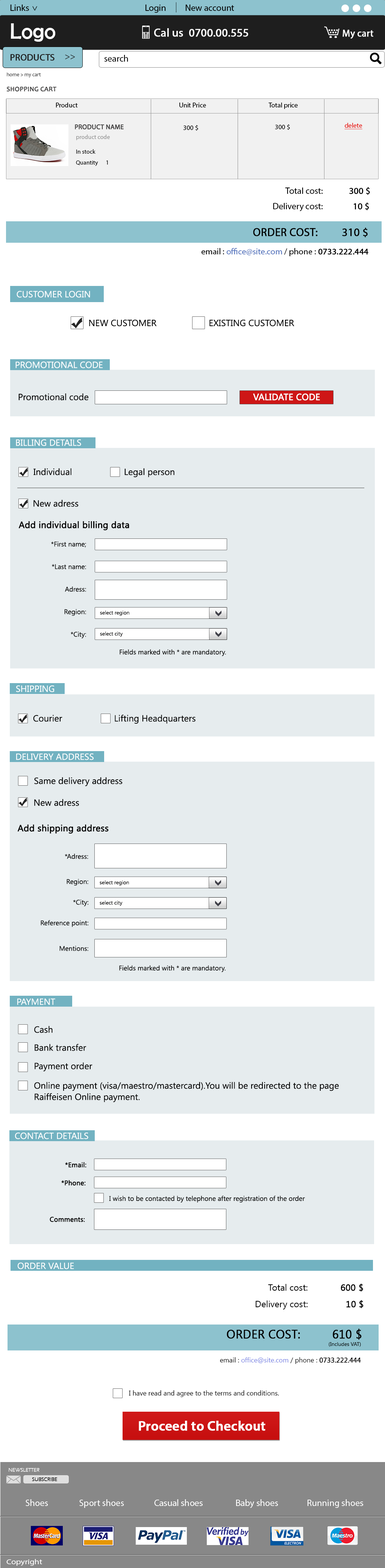
<style>
.page{position:relative;width:385px;height:1568px;background:#ffffff}
.page>*{position:absolute;margin:0}
.t1{font:9px "MyriadPro-Regular";color:#000000}
.t2{font:22.5px "BerlinSansFB-Reg";color:#ffffff}
.t3{font:11.3px "MyriadPro-Regular";color:#ffffff;font-weight:bold}
.t4{font:9.7px "MyriadPro-Regular";color:#ffffff;font-weight:bold}
.t5{font:9.2px "MyriadPro-Regular";color:#1e1e1e;text-transform:uppercase;font-weight:bold}
.t6{font:9px "MyriadPro-Regular";color:#1e1e1e;text-transform:uppercase}
.t7{font:9.2px "MyriadPro-Regular";color:#000000}
.t8{font:5.3px "Candara";color:#333333}
.t9{font:6.8px "Candara";color:#414040;text-transform:uppercase;font-weight:bold}
.t10{font:6.8px "MyriadPro-Regular";color:#000000}
.t11{font:6.8px "MyriadPro-Regular";color:#414040;text-transform:uppercase;font-weight:bold}
.t12{font:6.8px "MyriadPro-Regular";color:#020202}
.t13{font:6.8px "MyriadPro-Regular";color:#e81c17;text-decoration:underline}
.t14{font:6px "MyriadPro-Regular";color:#969696}
.t15{font:6px "MyriadPro-Regular";color:#020202}
.t16{font:9px "MyriadPro-Regular";color:#000000;font-weight:bold}
.t17{font:11.3px "MyriadPro-Regular";color:#000000;text-transform:uppercase;font-weight:bold}
.t18{font:8.6px "MyriadPro-Regular";color:#5272bc}
.t19{font:8.6px "MyriadPro-Regular";color:#000000}
.t20{font:8.6px "MyriadPro-Regular";color:#000000;font-weight:bold}
.t21{font:9px "SegoeUI";color:#ffffff;text-transform:uppercase}
.t22{font:9px "SegoeUI";color:#000000;text-transform:uppercase}
.t23{font:9px "SegoeUI";color:#000000}
.t24{font:9px "SegoeUI";color:#ffffff;text-transform:uppercase;font-weight:bold}
.t25{font:9px "SegoeUI";color:#000000;font-weight:bold}
.t26{font:6.8px/22.5px "SegoeUI";color:#000000}
.t27{font:5.3px "SegoeUI";color:#000000}
.t28{font:6.8px "SegoeUI";color:#000000}
.t29{font:8.9px "SegoeUI";color:#ffffff;text-transform:uppercase}
.t30{font:9px/11.3px "SegoeUI";color:#000000}
.t31{font:6.8px "SegoeUI";color:#000000;font-weight:bold}
.t32{font:11.9px "SegoeUI";color:#000000;text-transform:uppercase;font-weight:bold}
.t33{font:6.8px "SegoeUI";color:#7882e3}
.t34{font:13.5px "MyriadPro-Semibold";color:#ffffff;font-weight:bold}
.t35{font:5.3px "ErasITC-Light";color:#ffffff;text-transform:uppercase;font-weight:bold}
.t36{font:5.3px "ErasITC-Light";color:#000000;text-transform:uppercase;font-weight:bold}
.t37{font:9.2px "MyriadPro-Regular";color:#ffffff}
.t38{font:7.3px "MyriadPro-Regular";color:#fffefe;scale:1.18 1}
</style>
<div class="page">
<p class="t1" style="left:11px;top:5px;width:18px;height:6px">Links</p>
<p class="t1" style="left:145px;top:5px;width:21px;height:8px">Login</p>
<p class="t1" style="left:186px;top:5px;width:48px;height:6px">New account</p>
<p class="t1" style="left:32px;top:6px;width:5px;height:5px;rotate:90deg">&gt;</p>
<p class="t2" style="left:11px;top:23px;width:44px;height:19px">Logo</p>
<p class="t3" style="left:154px;top:28px;width:94px;height:9px">Cal us  0700.00.555</p>
<p class="t4" style="left:342px;top:30px;width:31px;height:9px">My cart</p>
<p class="t5" style="left:11px;top:54px;width:43px;height:7px">Products</p>
<p class="t6" style="left:65px;top:54px;width:10px;height:5px">&gt;&gt;</p>
<p class="t7" style="left:104px;top:55px;width:24px;height:7px">search</p>
<p class="t8" style="left:7px;top:73px;width:34px;height:4px">home &gt; my cart</p>
<p class="t9" style="left:7px;top:86px;width:49px;height:6px">shopping cart</p>
<p class="t10" style="left:56px;top:103px;width:22px;height:4px">Product</p>
<p class="t10" style="left:179px;top:103px;width:27px;height:4px">Unit Price</p>
<p class="t10" style="left:268px;top:103px;width:30px;height:6px">Total price</p>
<p class="t11" style="left:75px;top:124px;width:49px;height:6px">product name</p>
<p class="t12" style="left:183px;top:125px;width:15px;height:6px">300 $</p>
<p class="t12" style="left:275px;top:124px;width:15px;height:6px">300 $</p>
<p class="t13" style="left:344px;top:123px;width:18px;height:6px">delete</p>
<p class="t14" style="left:76px;top:135px;width:34px;height:5px">product code</p>
<p class="t15" style="left:76px;top:149px;width:19px;height:5px">In stock</p>
<p class="t15" style="left:76px;top:160px;width:32px;height:6px">Quantity      1</p>
<p class="t1" style="left:285px;top:187px;width:85px;height:8px">Total cost:<span class="t16">            300 $</span></p>
<p class="t1" style="left:273px;top:202px;width:96px;height:9px">Delivery cost: <span class="t16">             10 $</span></p>
<p class="t17" style="left:253px;top:228px;width:114px;height:9px">Order cost:         310 $</p>
<p class="t18" style="left:201px;top:248px;width:167px;height:8px"><span class="t19">email : </span>office@site.com <span class="t19">/ phone : </span><span class="t20">0733.222.444</span></p>
<p class="t21" style="left:17px;top:291px;width:73px;height:7px">Customer Login</p>
<p class="t22" style="left:89px;top:319px;width:68px;height:8px">new customer</p>
<p class="t22" style="left:209px;top:319px;width:85px;height:8px">existing Customer</p>
<p class="t21" style="left:15px;top:361px;width:88px;height:7px">promotional code</p>
<p class="t23" style="left:18px;top:393px;width:70px;height:8px">Promotional code</p>
<p class="t24" style="left:253px;top:393px;width:67px;height:8px">Validate code</p>
<p class="t21" style="left:16px;top:439px;width:65px;height:7px">billing details</p>
<p class="t23" style="left:33px;top:468px;width:141px;height:9px">Individual                     Legal person</p>
<p class="t23" style="left:33px;top:500px;width:45px;height:7px">New adress</p>
<p class="t25" style="left:18px;top:521px;width:111px;height:10px">Add individual billing data</p>
<p class="t26" style="left:51px;top:541px;width:35px;height:97px;text-align:right">*First name;<br>*Last name:<br>Adress:<br>Region:<br>*City:</p>
<p class="t27" style="left:100px;top:610px;width:29px;height:6px">select region</p>
<p class="t27" style="left:100px;top:631px;width:23px;height:6px">select city</p>
<p class="t28" style="left:119px;top:649px;width:107px;height:7px">Fields marked with * are mandatory.</p>
<p class="t21" style="left:16px;top:685px;width:38px;height:7px">shipping</p>
<p class="t23" style="left:33px;top:715px;width:162px;height:9px">Courier                     Lifting Headquarters</p>
<p class="t29" style="left:16px;top:753px;width:78px;height:7px">delivery address</p>
<p class="t23" style="left:34px;top:777px;width:88px;height:9px">Same delivery address</p>
<p class="t23" style="left:34px;top:799px;width:45px;height:7px">New adress</p>
<p class="t25" style="left:17px;top:824px;width:92px;height:10px">Add shipping address</p>
<p class="t28" style="left:65px;top:854px;width:23px;height:5px">*Adress:</p>
<p class="t28" style="left:67px;top:879px;width:21px;height:7px">Region:</p>
<p class="t27" style="left:100px;top:880px;width:29px;height:6px">select region</p>
<p class="t28" style="left:73px;top:900px;width:15px;height:6px">*City:</p>
<p class="t27" style="left:100px;top:900px;width:22px;height:6px">select city</p>
<p class="t28" style="left:41px;top:920px;width:47px;height:7px">Reference point:</p>
<p class="t28" style="left:59px;top:946px;width:29px;height:5px">Mentions:</p>
<p class="t28" style="left:119px;top:965px;width:106px;height:7px">Fields marked with * are mandatory.</p>
<p class="t29" style="left:17px;top:998px;width:38px;height:7px">Payment</p>
<p class="t23" style="left:34px;top:1026px;width:19px;height:7px">Cash</p>
<p class="t23" style="left:35px;top:1044px;width:51px;height:7px">Bank transfer</p>
<p class="t23" style="left:35px;top:1062px;width:57px;height:10px">Payment order</p>
<p class="t30" style="left:34px;top:1082px;width:305px;height:20px">Online payment (visa/maestro/mastercard).You will be redirected to the page <br>Raiffeisen Online payment.</p>
<p class="t29" style="left:15px;top:1133px;width:73px;height:6px">Contact details</p>
<p class="t31" style="left:65px;top:1162px;width:21px;height:5px">*Email:</p>
<p class="t31" style="left:61px;top:1180px;width:25px;height:5px">*Phone:</p>
<p class="t28" style="left:109px;top:1196px;width:196px;height:7px">I wish to be contacted by telephone after registration of the order</p>
<p class="t31" style="left:50px;top:1217px;width:35px;height:5px">Comments:</p>
<p class="t29" style="left:18px;top:1263px;width:56px;height:6px">order value</p>
<p class="t23" style="left:268px;top:1284px;width:95px;height:8px">Total cost:<span class="t25">            600 $</span></p>
<p class="t23" style="left:256px;top:1300px;width:107px;height:9px">Delivery cost: <span class="t25">             10 $</span></p>
<p class="t32" style="left:227px;top:1329px;width:134px;height:11px">Order cost:         610 $</p>
<p class="t27" style="left:328px;top:1342px;width:33px;height:5px">(Includes VAT)</p>
<p class="t33" style="left:220px;top:1357px;width:141px;height:7px"><span class="t28">email : </span>office@site.com<span class="t28"> / phone : </span><span class="t31">0733.222.444</span></p>
<p class="t28" style="left:129px;top:1390px;width:150px;height:7px">I have read and agree to the terms and conditions.</p>
<p class="t34" style="left:139px;top:1421px;width:126px;height:10px">Proceed to Checkout</p>
<p class="t35" style="left:9px;top:1468px;width:30px;height:4px">Newsletter</p>
<p class="t36" style="left:32px;top:1477px;width:25px;height:4px">subscribe</p>
<p class="t37" style="left:26px;top:1499px;width:22px;height:7px">Shoes</p>
<p class="t37" style="left:79px;top:1499px;width:45px;height:9px">Sport shoes</p>
<p class="t37" style="left:154px;top:1499px;width:49px;height:7px">Casual shoes</p>
<p class="t37" style="left:236px;top:1499px;width:42px;height:9px">Baby shoes</p>
<p class="t37" style="left:307px;top:1499px;width:56px;height:9px">Running shoes</p>
<p class="t38" style="left:6px;top:1559px;width:36px;height:7px">Copyright</p>
</div>
